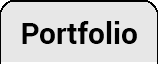
<style>
.page{position:relative;width:158px;height:64px;background:#e7e7e7}
.page>*{position:absolute;margin:0}
.t1{font:30px "Roboto-Bold";color:#000000}
</style>
<div class="page">
<p class="t1" style="left:22px;top:21px;width:115px;height:23px">Portfolio</p>
</div>
